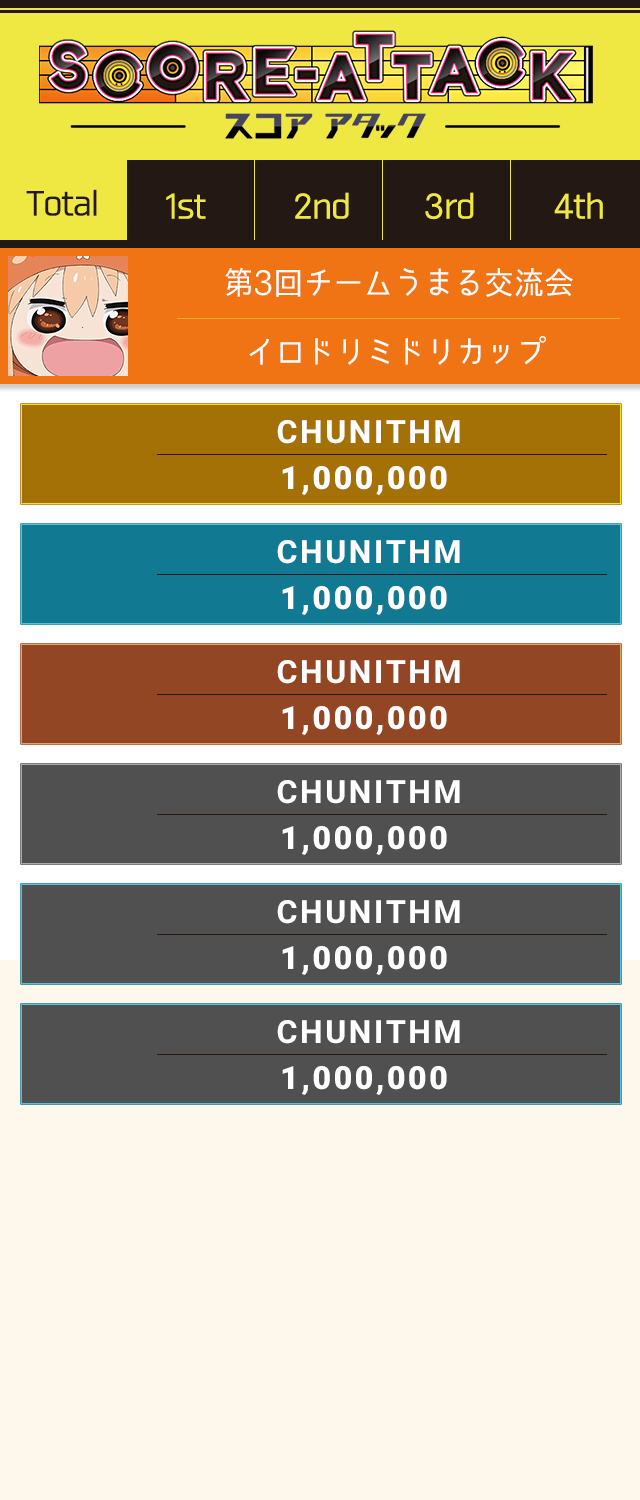
<style>
.page{position:relative;width:640px;height:1500px;background:#fef7ec}
.page>*{position:absolute;margin:0}
.t1{font:32px "03SmartFontUI";letter-spacing:-0.06em;color:#241815;font-weight:bold}
.t2{font:32px "03SmartFontUI";letter-spacing:-0.06em;color:#efe742;font-weight:bold}
.t3{font:32px "03SmartFontUI";letter-spacing:-0.06em;color:#fffefe}
.t4{font:32px "Roboto-Bold";letter-spacing:0.08em;color:#fffefe}
.t5{font:32px "Roboto-Black";letter-spacing:0.08em;color:#fffefe}
</style>
<div class="page">
<p class="t1" style="left:26px;top:189px;width:71px;height:27px">Total</p>
<p class="t2" style="left:166px;top:193px;width:40px;height:26px">1st</p>
<p class="t2" style="left:295px;top:192px;width:54px;height:27px">2nd</p>
<p class="t2" style="left:425px;top:192px;width:49px;height:28px">3rd</p>
<p class="t2" style="left:554px;top:192px;width:49px;height:27px">4th</p>
<p class="t3" style="left:225px;top:267px;width:348px;height:30px">第3回チームうまる交流会</p>
<p class="t3" style="left:249px;top:336px;width:297px;height:29px">イロドリミドリカップ</p>
<p class="t4" style="left:277px;top:420px;width:183px;height:24px">CHUNITHM</p>
<p class="t5" style="left:282px;top:466px;width:165px;height:29px">1,000,000</p>
<p class="t4" style="left:277px;top:540px;width:183px;height:24px">CHUNITHM</p>
<p class="t5" style="left:282px;top:586px;width:165px;height:29px">1,000,000</p>
<p class="t4" style="left:277px;top:660px;width:183px;height:24px">CHUNITHM</p>
<p class="t5" style="left:282px;top:706px;width:165px;height:29px">1,000,000</p>
<p class="t4" style="left:277px;top:780px;width:183px;height:24px">CHUNITHM</p>
<p class="t5" style="left:282px;top:826px;width:165px;height:29px">1,000,000</p>
<p class="t4" style="left:277px;top:900px;width:183px;height:24px">CHUNITHM</p>
<p class="t5" style="left:282px;top:946px;width:165px;height:29px">1,000,000</p>
<p class="t4" style="left:277px;top:1020px;width:183px;height:24px">CHUNITHM</p>
<p class="t5" style="left:282px;top:1066px;width:165px;height:29px">1,000,000</p>
</div>
